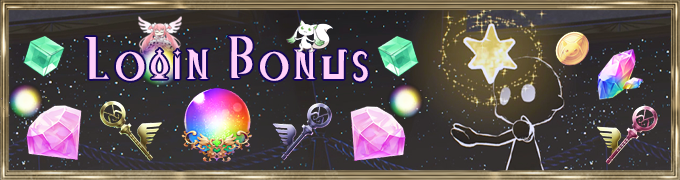
<style>
.page{position:relative;width:680px;height:180px}
.page>*{position:absolute;margin:0}
.t1{font:56.7px "MagiaRecordRegular";letter-spacing:0.05em;color:#ffcff9;font-variant:small-caps}
</style>
<div class="page">
<p class="t1" style="left:85px;top:36px;width:283px;height:46px">Login Bonus</p>
</div>
